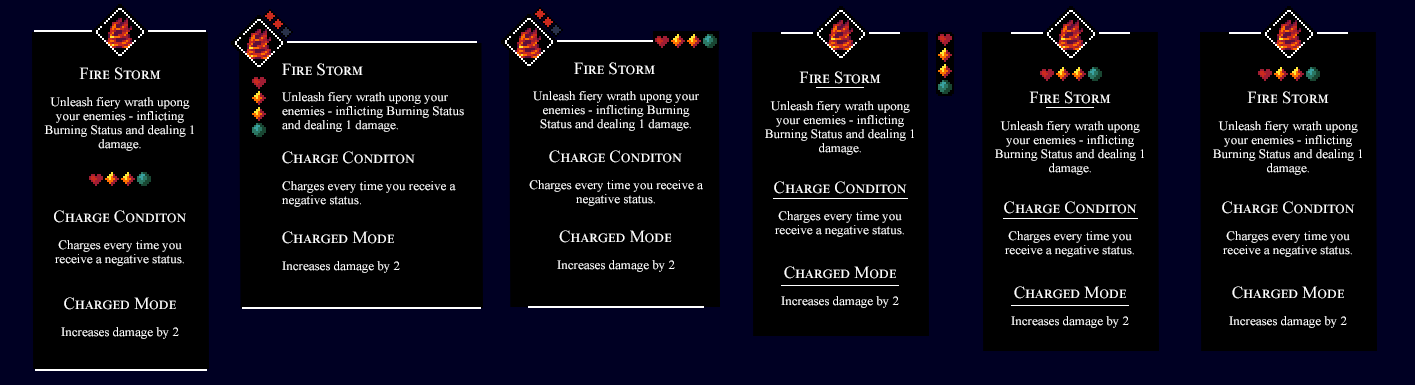
<style>
.page{position:relative;width:1415px;height:385px;background:#000000}
.page>*{position:absolute;margin:0}
.t1{font:17px "TimesNewRomanPSMT";color:#ffffff;font-variant:small-caps}
.t2{font:13px/14px "TimesNewRomanPSMT";color:#ffffff}
.t3{font:13px "TimesNewRomanPSMT";color:#ffffff}
</style>
<div class="page">
<p class="t1" style="left:282px;top:63px;width:81px;height:13px">Fire Storm</p>
<p class="t1" style="left:574px;top:62px;width:81px;height:13px">Fire Storm</p>
<p class="t1" style="left:79px;top:67px;width:82px;height:13px">Fire Storm</p>
<p class="t1" style="left:799px;top:71px;width:82px;height:13px">Fire Storm</p>
<p class="t2" style="left:44px;top:97px;width:150px;height:54px;text-align:center">Unleash fiery wrath upong your enemies - inflicting Burning Status and dealing 1 damage.</p>
<p class="t2" style="left:282px;top:92px;width:182px;height:40px">Unleash fiery wrath upong your enemies - inflicting Burning Status and dealing 1 damage.</p>
<p class="t2" style="left:533px;top:91px;width:166px;height:40px;text-align:center">Unleash fiery wrath upong your enemies - inflicting Burning Status and dealing 1 damage.</p>
<p class="t2" style="left:765px;top:101px;width:149px;height:54px;text-align:center">Unleash fiery wrath upong your enemies - inflicting Burning Status and dealing 1 damage.</p>
<p class="t1" style="left:1029px;top:91px;width:82px;height:13px">Fire Storm</p>
<p class="t1" style="left:1247px;top:91px;width:82px;height:13px">Fire Storm</p>
<p class="t2" style="left:995px;top:121px;width:149px;height:54px;text-align:center">Unleash fiery wrath upong your enemies - inflicting Burning Status and dealing 1 damage.</p>
<p class="t2" style="left:1213px;top:121px;width:149px;height:54px;text-align:center">Unleash fiery wrath upong your enemies - inflicting Burning Status and dealing 1 damage.</p>
<p class="t1" style="left:549px;top:150px;width:133px;height:13px">Charge Conditon</p>
<p class="t1" style="left:282px;top:151px;width:133px;height:13px">Charge Conditon</p>
<p class="t2" style="left:282px;top:181px;width:174px;height:26px">Charges every time you receive a negative status.</p>
<p class="t2" style="left:529px;top:180px;width:174px;height:26px;text-align:center">Charges every time you receive a negative status.</p>
<p class="t1" style="left:774px;top:181px;width:133px;height:13px">Charge Conditon</p>
<p class="t1" style="left:1004px;top:201px;width:133px;height:13px">Charge Conditon</p>
<p class="t1" style="left:1222px;top:201px;width:133px;height:13px">Charge Conditon</p>
<p class="t1" style="left:54px;top:210px;width:132px;height:13px">Charge Conditon</p>
<p class="t2" style="left:775px;top:211px;width:129px;height:26px;text-align:center">Charges every time you receive a negative status.</p>
<p class="t1" style="left:282px;top:231px;width:112px;height:13px">Charged Mode</p>
<p class="t1" style="left:559px;top:230px;width:113px;height:13px">Charged Mode</p>
<p class="t2" style="left:1005px;top:231px;width:129px;height:26px;text-align:center">Charges every time you receive a negative status.</p>
<p class="t2" style="left:1223px;top:231px;width:129px;height:26px;text-align:center">Charges every time you receive a negative status.</p>
<p class="t2" style="left:55px;top:240px;width:129px;height:26px;text-align:center">Charges every time you receive a negative status.</p>
<p class="t3" style="left:282px;top:261px;width:118px;height:12px">Increases damage by 2</p>
<p class="t3" style="left:557px;top:260px;width:118px;height:12px">Increases damage by 2</p>
<p class="t1" style="left:784px;top:266px;width:112px;height:13px">Charged Mode</p>
<p class="t1" style="left:1014px;top:286px;width:112px;height:13px">Charged Mode</p>
<p class="t1" style="left:1232px;top:286px;width:112px;height:13px">Charged Mode</p>
<p class="t1" style="left:64px;top:297px;width:112px;height:13px">Charged Mode</p>
<p class="t3" style="left:781px;top:296px;width:118px;height:12px">Increases damage by 2</p>
<p class="t3" style="left:1011px;top:316px;width:118px;height:12px">Increases damage by 2</p>
<p class="t3" style="left:1229px;top:316px;width:118px;height:12px">Increases damage by 2</p>
<p class="t3" style="left:61px;top:327px;width:118px;height:12px">Increases damage by 2</p>
</div>
